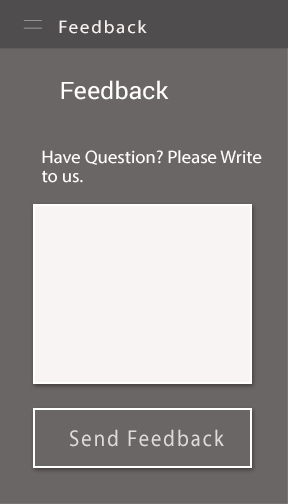
<style>
.page{position:relative;width:288px;height:504px;background:#6b6666}
.page>*{position:absolute;margin:0}
.t1{font:18px "MyriadPro-Regular";letter-spacing:0.1em;color:#f6f1f1;scale:1.04 1}
.t2{font:24px "Roboto-Regular";color:#ffffff;scale:1.04 1}
.t3{font:18px/18.9px "MyriadPro-Regular";color:#ffffff;scale:1.04 1}
.t4{font:23px "MyriadPro-Regular";letter-spacing:0.1em;color:#dddcdc;scale:0.89 1}
</style>
<div class="page">
<p class="t1" style="left:59px;top:20px;width:88px;height:14px">Feedback</p>
<p class="t2" style="left:61px;top:80px;width:108px;height:20px">Feedback</p>
<p class="t3" style="left:42px;top:150px;width:220px;height:33px">Have Question? Please Write<br>to us.</p>
<p class="t4" style="left:70px;top:429px;width:154px;height:18px">Send Feedback</p>
</div>
